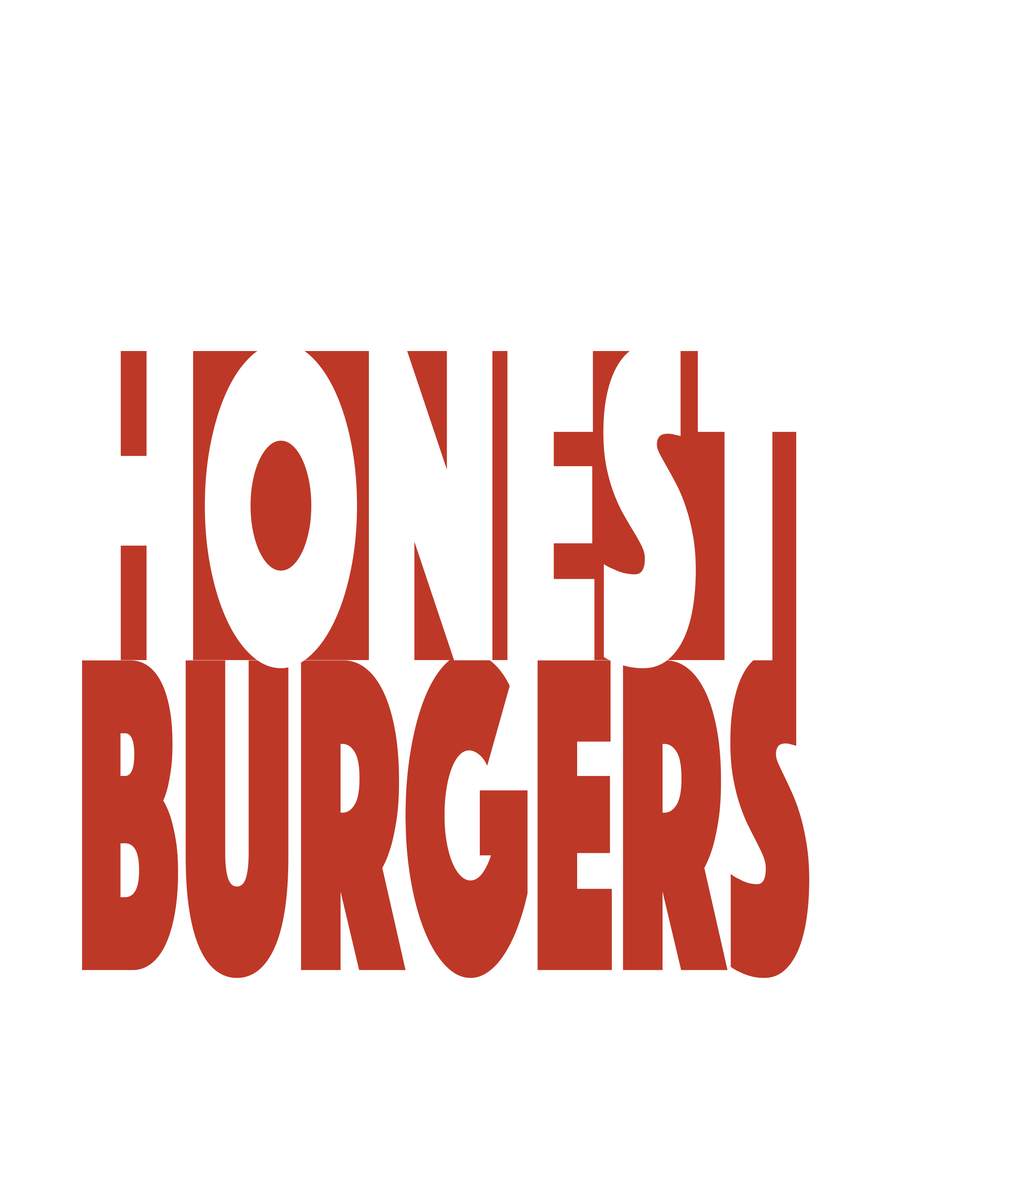
<style>
.page{position:relative;width:1012px;height:1179px;background:#ffffff}
.page>*{position:absolute;margin:0}
.t1{font:464.1px "Phosphate-Solid";color:#ffffff;scale:0.47 1}
.t2{font:464.1px "Phosphate-Solid";color:#be3827;scale:0.4 1}
</style>
<div class="page">
<p class="t1" style="left:74px;top:343px;width:725px;height:325px">honest</p>
<p class="t2" style="left:82px;top:652px;width:727px;height:326px">BURGERS</p>
</div>
